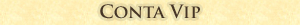
<style>
.page{position:relative;width:300px;height:25px}
.page>*{position:absolute;margin:0}
.t1{font:18px "TrajanPro-Bold";color:#453526}
</style>
<div class="page">
<p class="t1" style="left:100px;top:4px;width:100px;height:15px">Conta Vip</p>
</div>
